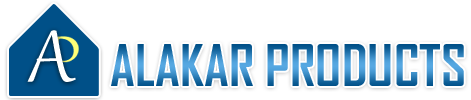
<style>
.page{position:relative;width:471px;height:100px;background:#ffffff}
.page>*{position:absolute;margin:0}
.t1{font:90px "Gabriola";color:#ffffff}
.t2{font:55px "AgencyFB-Bold"}
</style>
<div class="page">
<p class="t1" style="left:27px;top:30px;width:49px;height:52px">A</p>
<p class="t2" style="left:111px;top:44px;width:353px;height:42px">ALAKAR PRODUCTS</p>
</div>
